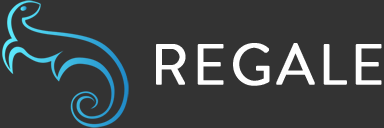
<style>
.page{position:relative;width:384px;height:128px;background:#333333}
.page>*{position:absolute;margin:0}
.t1{font:56.9px "BrandonGrotesque-Regular";letter-spacing:0.05em;color:#fefefe;text-transform:uppercase;font-weight:bold}
</style>
<div class="page">
<p class="t1" style="left:156px;top:43px;width:226px;height:43px">Regale</p>
</div>
